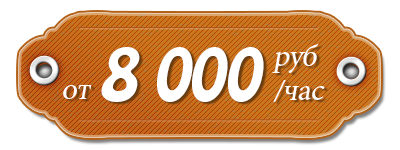
<style>
.page{position:relative;width:400px;height:150px;background:#ffffff}
.page>*{position:absolute;margin:0}
.t1{font:65.8px "HoboStd";letter-spacing:-0.035em;color:#ffffff;font-style:italic}
.t2{font:30.8px/34.1px "MinionPro-Regular";letter-spacing:-0.025em;color:#ffffff;font-style:italic}
.t3{font:30.8px "MinionPro-Regular";letter-spacing:-0.025em;color:#ffffff;font-style:italic}
</style>
<div class="page">
<p class="t1" style="left:101px;top:47px;width:163px;height:55px">8 000</p>
<p class="t2" style="left:272px;top:43px;width:53px;height:59px">руб<br>/час</p>
<p class="t3" style="left:63px;top:85px;width:29px;height:14px">от</p>
</div>
